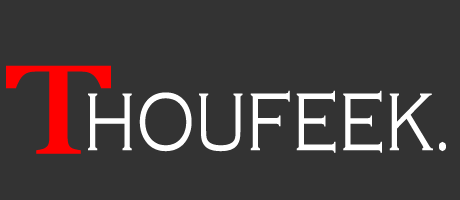
<style>
.page{position:relative;width:460px;height:200px;background:#333333}
.page>*{position:absolute;margin:0}
.t1{font:225.8px "Cambria";color:#ff0000;scale:1.5 1}
.t2{font:145.3px "CopperplateGothic-Light";color:#ffffff;scale:0.76 1}
</style>
<div class="page">
<p class="t1" style="left:6px;top:65px;width:105px;height:89px">T</p>
<p class="t2" style="left:88px;top:90px;width:358px;height:63px">HOUFEEK.</p>
</div>
